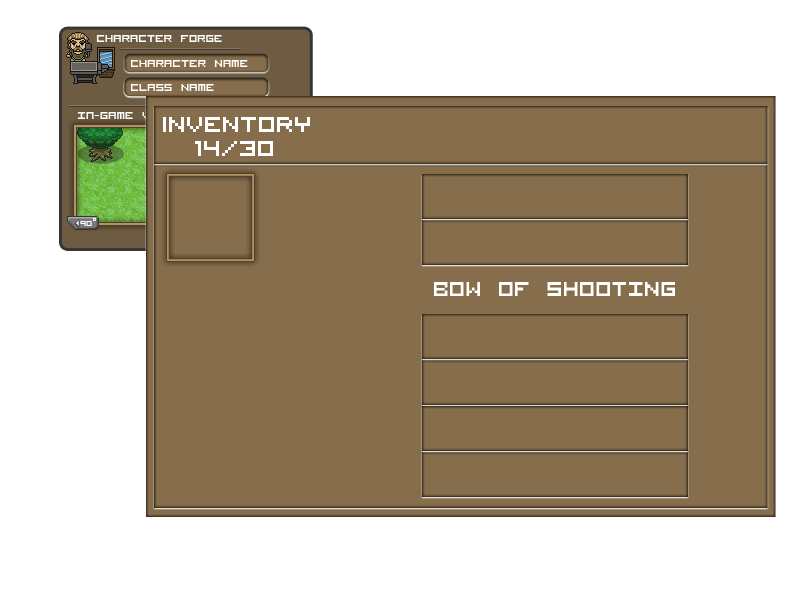
<style>
.page{position:relative;width:800px;height:600px;background:#866e4c}
.page>*{position:absolute;margin:0}
.t1{font:14px "VisitorTT1BRK";color:#ffffff}
.t2{font:30px "VisitorTT1BRK";color:#ffffff}
.t3{font:10px "VisitorTT1BRK";color:#ffffff}
.t4{font:27.1px "VisitorTT1BRK";color:#ffffff}
</style>
<div class="page">
<p class="t1" style="left:96px;top:35px;width:126px;height:7px">Character Forge</p>
<p class="t1" style="left:130px;top:60px;width:118px;height:7px">Character Name</p>
<p class="t1" style="left:130px;top:84px;width:84px;height:7px">Class Name</p>
<p class="t1" style="left:77px;top:112px;width:93px;height:7px">In-Game View</p>
<p class="t2" style="left:163px;top:117px;width:147px;height:15px">iNVENTORY</p>
<p class="t2" style="left:195px;top:141px;width:78px;height:15px">14/30</p>
<p class="t3" style="left:80px;top:221px;width:12px;height:5px">90</p>
<p class="t4" style="left:434px;top:282px;width:241px;height:14px">bOW OF sHOOTING</p>
</div>
